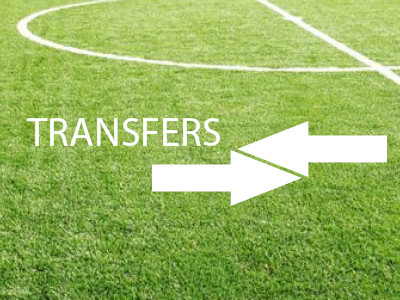
<style>
.page{position:relative;width:400px;height:300px}
.page>*{position:absolute;margin:0}
.t1{font:40.5px "MyriadHebrew-Regular";color:#ffffff}
</style>
<div class="page">
<p class="t1" style="left:26px;top:118px;width:194px;height:28px">TRANSFERS</p>
</div>
